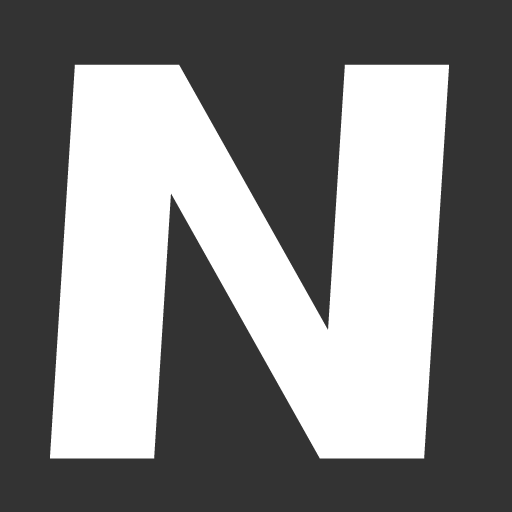
<style>
.page{position:relative;width:512px;height:512px;background:#333333}
.page>*{position:absolute;margin:0}
.t1{font:696.1px "851Gkktt";color:#ffffff;scale:0.74 1}
</style>
<div class="page">
<p class="t1" style="left:50px;top:64px;width:399px;height:395px">N</p>
</div>
